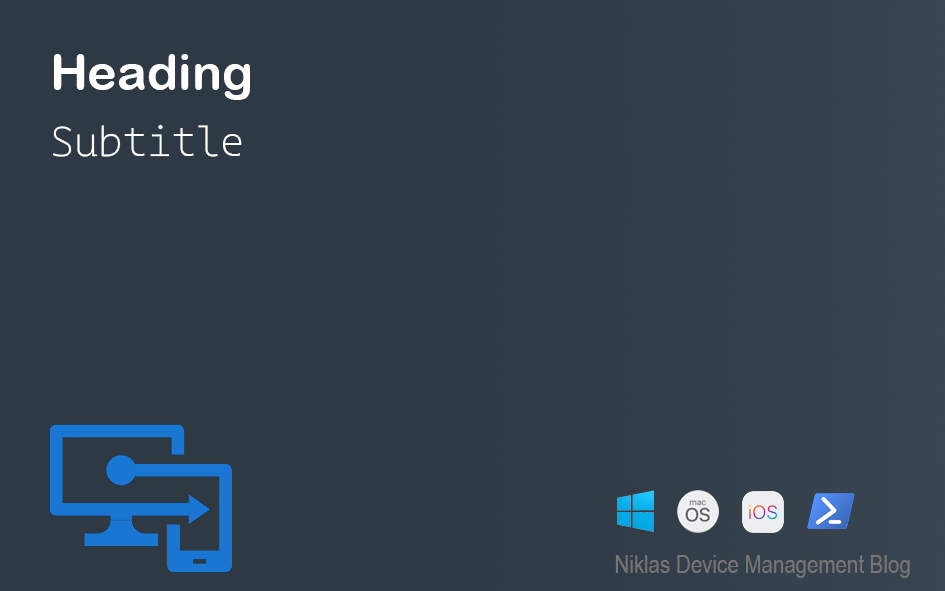
<style>
.page{position:relative;width:945px;height:591px;background:#2f3944}
.page>*{position:absolute;margin:0}
.t1{font:50px "ArialRoundedMTBold";color:#ffffff}
.t2{font:41.7px "CaskaydiaCoveNF-ExtraLight";color:#ffffff}
.t3{font:25px "ArialNarrow";color:#767676}
</style>
<div class="page">
<p class="t1" style="left:54px;top:54px;width:196px;height:46px">Heading</p>
<p class="t2" style="left:53px;top:124px;width:189px;height:33px">Subtitle</p>
<p class="t3" style="left:615px;top:555px;width:295px;height:23px">Niklas Device Management Blog</p>
</div>
